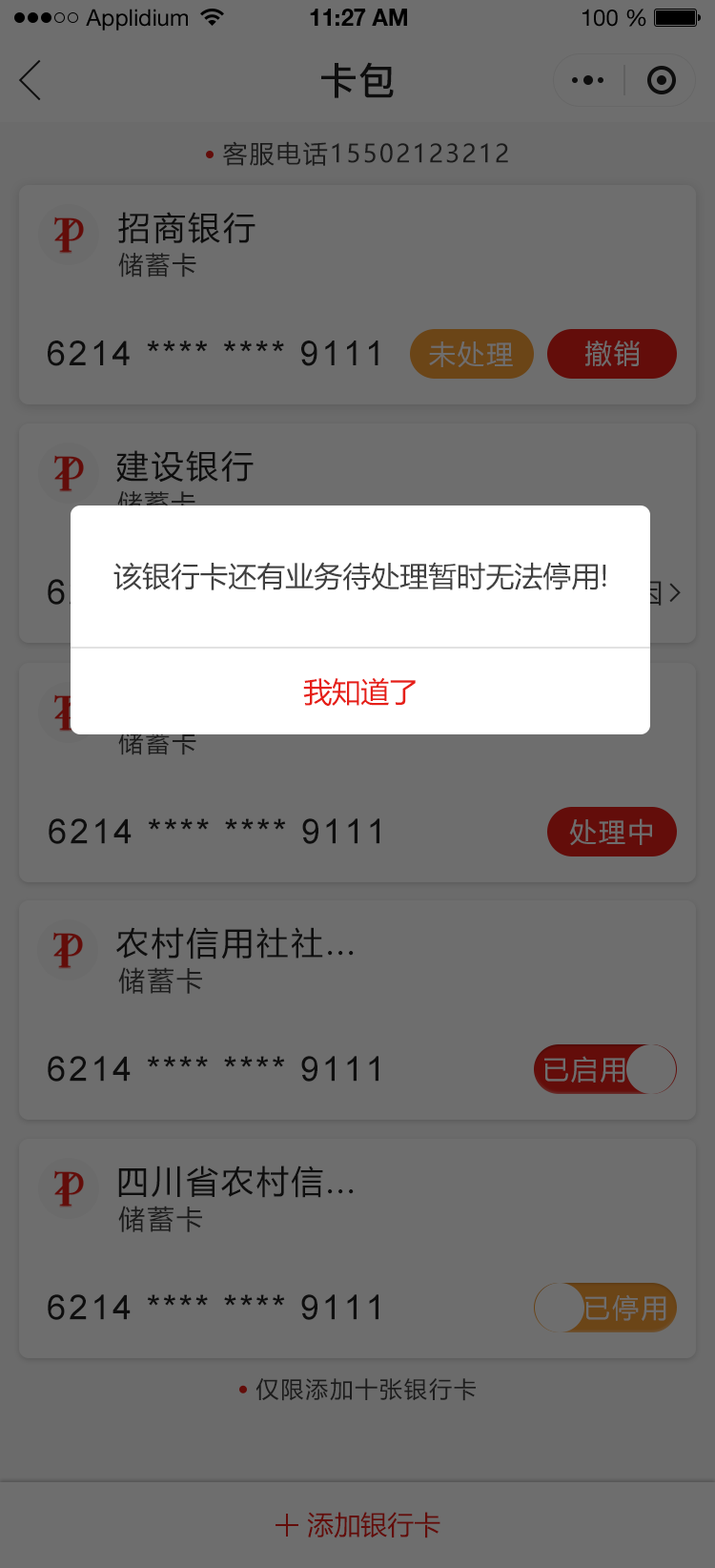
<style>
.page{position:relative;width:715px;height:1568px;background:#6e6e6e}
.page>*{position:absolute;margin:0}
.t1{font:22.9px "HelveticaNeueLTStd-Roman";color:#000000}
.t2{font:22.9px "HelveticaNeueLTStd-Bd";color:#000000}
.t3{font:38.2px "PingFang-SC-Bold";color:#202020;text-transform:uppercase}
.t4{font:24.8px "MicrosoftYaHei";letter-spacing:0.08em;color:#1c1c1c}
.t5{font:32.4px "MicrosoftYaHei";letter-spacing:0.08em;color:#202020}
.t6{font:34.3px "ArialMT";letter-spacing:0.08em;color:#202020}
.t7{font:26.7px "MicrosoftYaHei";letter-spacing:0.08em;color:#6e6e6e}
.t8{font:28.6px "MicrosoftYaHei";color:#404040;text-transform:uppercase}
.t9{font:28.6px "MicrosoftYaHei";color:#e61f18;text-transform:uppercase}
.t10{font:26.7px "MicrosoftYaHei";letter-spacing:0.08em;color:#1c1c1c}
.t11{font:22.9px "MicrosoftYaHei";letter-spacing:0.08em;color:#1c1c1c}
.t12{font:26.7px "MicrosoftYaHei";color:#630d0a;text-transform:uppercase}
</style>
<div class="page">
<p class="t1" style="left:86px;top:9px;width:102px;height:22px">Applidium</p>
<p class="t2" style="left:310px;top:9px;width:97px;height:17px">11:27 AM</p>
<p class="t1" style="left:583px;top:9px;width:64px;height:18px">100 %</p>
<p class="t3" style="left:321px;top:62px;width:73px;height:36px">卡包</p>
<p class="t4" style="left:222px;top:141px;width:286px;height:25px">客服电话15502123212</p>
<p class="t5" style="left:118px;top:212px;width:138px;height:32px">招商银行</p>
<p class="t4" style="left:118px;top:253px;width:78px;height:25px">储蓄卡</p>
<p class="t6" style="left:48px;top:340px;width:331px;height:26px">6214 **** **** 9111</p>
<p class="t7" style="left:429px;top:341px;width:84px;height:27px">未处理</p>
<p class="t7" style="left:586px;top:340px;width:54px;height:27px">撤销</p>
<p class="t5" style="left:116px;top:450px;width:138px;height:33px">建设银行</p>
<p class="t8" style="left:113px;top:562px;width:494px;height:28px">该银行卡还有业务待处理暂时无法停用!</p>
<p class="t9" style="left:303px;top:677px;width:113px;height:29px">我知道了</p>
<p class="t4" style="left:118px;top:731px;width:78px;height:24px">储蓄卡</p>
<p class="t6" style="left:49px;top:818px;width:331px;height:26px">6214 **** **** 9111</p>
<p class="t7" style="left:569px;top:818px;width:83px;height:28px">处理中</p>
<p class="t5" style="left:116px;top:927px;width:238px;height:32px">农村信用社社...</p>
<p class="t10" style="left:118px;top:967px;width:84px;height:27px">储蓄卡</p>
<p class="t6" style="left:48px;top:1056px;width:331px;height:26px">6214 **** **** 9111</p>
<p class="t7" style="left:545px;top:1056px;width:81px;height:27px">已启用</p>
<p class="t5" style="left:118px;top:1166px;width:236px;height:32px">四川省农村信...</p>
<p class="t10" style="left:118px;top:1206px;width:84px;height:26px">储蓄卡</p>
<p class="t6" style="left:48px;top:1294px;width:331px;height:26px">6214 **** **** 9111</p>
<p class="t7" style="left:586px;top:1294px;width:81px;height:27px">已停用</p>
<p class="t11" style="left:256px;top:1378px;width:220px;height:23px">仅限添加十张银行卡</p>
<p class="t12" style="left:307px;top:1512px;width:134px;height:26px">添加银行卡</p>
</div>
